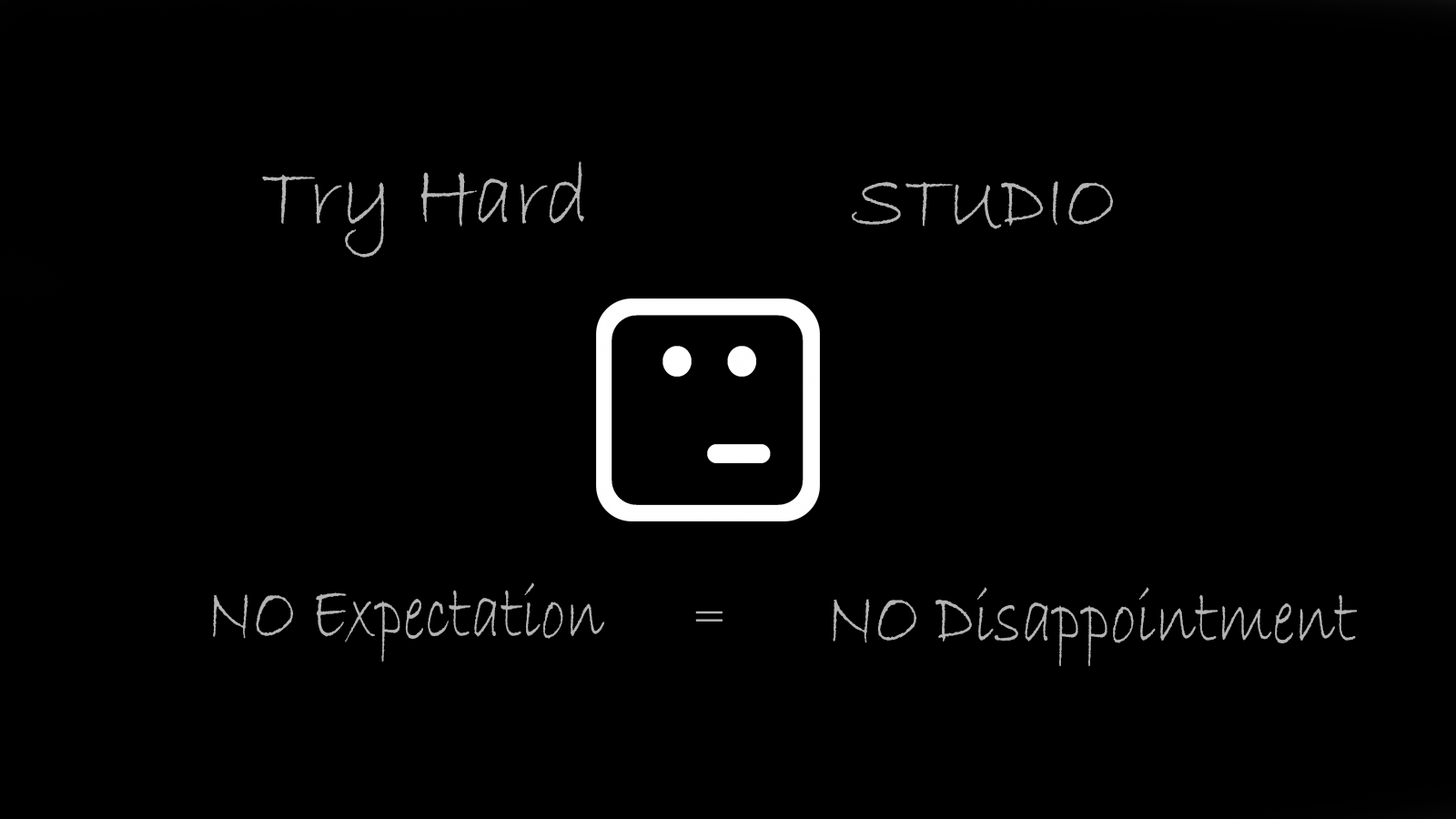
<style>
.page{position:relative;width:1456px;height:819px;background:#000000}
.page>*{position:absolute;margin:0}
.t1{font:90.2px "BradleyHandITC";color:#b4b4b4;scale:0.91 1}
.t2{font:81.4px "BradleyHandITC";color:#b4b4b4;scale:0.9 1}
.t3{font:79px "BradleyHandITC";color:#b4b4b4;scale:0.77 1}
.t4{font:79px "BradleyHandITC";color:#b4b4b4;scale:0.81 1}
.t5{font:44.6px "BradleyHandITC";color:#b4b4b4}
</style>
<div class="page">
<p class="t1" style="left:262px;top:161px;width:322px;height:97px">Try Hard</p>
<p class="t2" style="left:852px;top:181px;width:261px;height:48px">STUDIO</p>
<p class="t3" style="left:213px;top:582px;width:391px;height:80px">NO Expectation</p>
<p class="t4" style="left:833px;top:587px;width:525px;height:79px">NO Disappointment</p>
<p class="t5" style="left:695px;top:611px;width:28px;height:11px">=</p>
</div>
